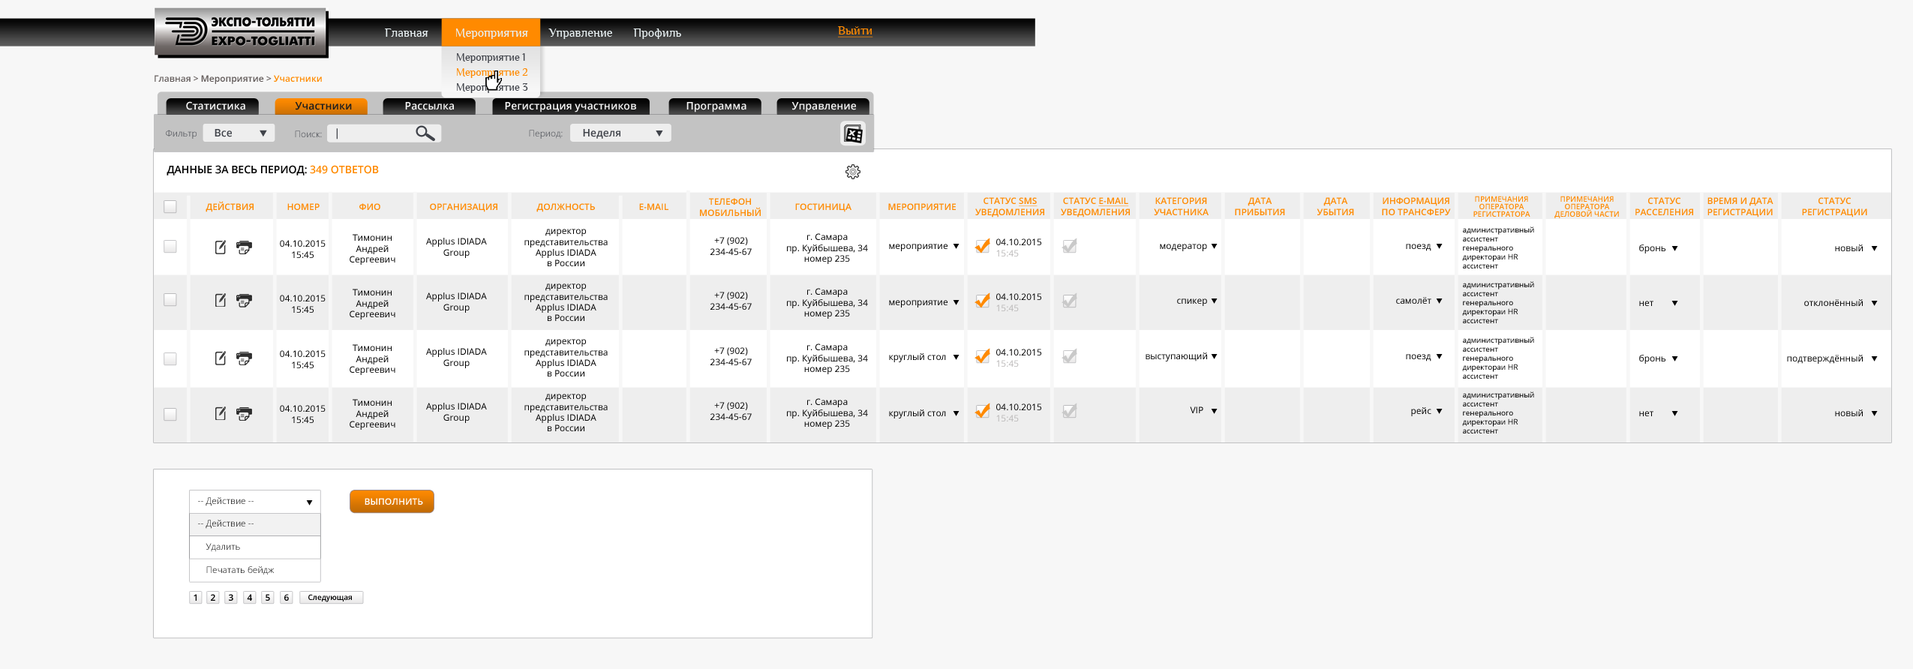
<style>
.page{position:relative;width:1913px;height:669px;background:#f7f7f7}
.page>*{position:absolute;margin:0}
.t1{font:12.4px "Philosopher";color:#e7eff1}
.t2{font:12px "Philosopher";color:#ff8a00;text-decoration:underline}
.t3{font:10.8px/15px "Philosopher";color:#40434a}
.t4{font:10.8px/15px "Philosopher";color:#ff8a00}
.t5{font:9px "OpenSans-Semibold";color:#615a59}
.t6{font:9px "OpenSans-Semibold";color:#ff8a00}
.t7{font:10.5px "OpenSans-Semibold";color:#f7f7f7}
.t8{font:10.5px "OpenSans-Semibold";color:#1d1d1d}
.t9{font:9px "OpenSans-Light"}
.t10{font:10.5px "OpenSans-Semibold";color:#40434a}
.t11{font:9px "OpenSans-Light";color:#40434a}
.t12{font:10.5px "OpenSans-Semibold";color:#000000;text-transform:uppercase}
.t13{font:10.5px "OpenSans-Semibold";color:#ff8a00;text-transform:uppercase}
.t14{font:9px "OpenSans-Semibold";color:#ff8a00;text-transform:uppercase}
.t15{font:9px "OpenSans-Semibold";color:#ff8a00;text-transform:uppercase;text-decoration:underline}
.t16{font:7.5px/7.5px "OpenSans-Semibold";color:#ff8a00;text-transform:uppercase}
.t17{font:9px "OpenSans";color:#000000}
.t18{font:7.5px "OpenSans";color:#000000}
.t19{font:9px "OpenSans";color:#b9b7b7}
.t20{font:9px "OpenSans-Semibold";color:#ffffff;text-transform:uppercase}
.t21{font:9px "OpenSans-Semibold";color:#000000}
.t22{font:7.5px "OpenSans-Semibold";color:#000000}
</style>
<div class="page">
<p class="t1" style="left:385px;top:29px;width:296px;height:10px">Главная         Мероприятия       Управление       Профиль</p>
<p class="t2" style="left:838px;top:26px;width:35px;height:12px">Выйти</p>
<p class="t3" style="left:457px;top:53px;width:71px;height:40px">Мероприятие 1<br><span class="t4">Мероприятие 2<br></span>Мероприятие 3</p>
<p class="t5" style="left:155px;top:75px;width:167px;height:9px">Главная &gt; Мероприятие &gt; <span class="t6">Участники</span></p>
<p class="t7" style="left:186px;top:101px;width:59px;height:9px">Статистика</p>
<p class="t8" style="left:295px;top:102px;width:57px;height:8px">Участники</p>
<p class="t7" style="left:405px;top:102px;width:49px;height:8px">Рассылка</p>
<p class="t7" style="left:505px;top:102px;width:131px;height:11px">Регистрация участников</p>
<p class="t7" style="left:686px;top:102px;width:60px;height:11px">Программа</p>
<p class="t7" style="left:791px;top:102px;width:65px;height:11px">Управление</p>
<p class="t9" style="left:166px;top:130px;width:31px;height:9px">Фильтр</p>
<p class="t10" style="left:215px;top:129px;width:17px;height:8px">Все</p>
<p class="t11" style="left:295px;top:131px;width:27px;height:6px">Поиск:</p>
<p class="t10" style="left:336px;top:128px;width:2px;height:12px">|</p>
<p class="t9" style="left:529px;top:130px;width:34px;height:9px">Период:</p>
<p class="t10" style="left:583px;top:129px;width:37px;height:10px">Неделя</p>
<p class="t12" style="left:167px;top:165px;width:212px;height:11px">данные за весь период: <span class="t13">349 ответов</span></p>
<p class="t14" style="left:975px;top:197px;width:69px;height:21px;text-align:center">Статус <span class="t15">SMS<br></span>уведомления</p>
<p class="t14" style="left:1061px;top:197px;width:69px;height:21px;text-align:center">Статус <span class="t15">e-mail<br></span>уведомления</p>
<p class="t14" style="left:1154px;top:197px;width:54px;height:18px;text-align:center">категория<br>участника</p>
<p class="t14" style="left:1235px;top:197px;width:50px;height:18px;text-align:center">дата<br>прибытия</p>
<p class="t14" style="left:1316px;top:197px;width:38px;height:18px;text-align:center">дата<br>убытия</p>
<p class="t14" style="left:1382px;top:197px;width:69px;height:18px;text-align:center">информация<br>по трансферу</p>
<p class="t16" style="left:1473px;top:196px;width:57px;height:21px;text-align:center">примечания<br>оператора<br>регистратора</p>
<p class="t16" style="left:1554px;top:196px;width:65px;height:22px;text-align:center">примечания<br>оператора<br>деловой части</p>
<p class="t14" style="left:1635px;top:197px;width:58px;height:18px;text-align:center">статус<br>расселения</p>
<p class="t14" style="left:1707px;top:197px;width:66px;height:21px;text-align:center">время и дата<br>регистрации</p>
<p class="t14" style="left:1802px;top:197px;width:65px;height:21px;text-align:center">статус<br>регистрации</p>
<p class="t14" style="left:206px;top:201px;width:48px;height:11px">действия</p>
<p class="t14" style="left:287px;top:203px;width:33px;height:7px">номер</p>
<p class="t14" style="left:359px;top:203px;width:21px;height:7px">фио</p>
<p class="t14" style="left:430px;top:203px;width:67px;height:9px">Организация</p>
<p class="t14" style="left:536px;top:203px;width:59px;height:9px">должность</p>
<p class="t14" style="left:639px;top:203px;width:29px;height:7px">E-mail</p>
<p class="t14" style="left:700px;top:198px;width:61px;height:18px;text-align:center">телефон<br>мобильный</p>
<p class="t14" style="left:795px;top:203px;width:56px;height:9px">гостиница</p>
<p class="t14" style="left:888px;top:203px;width:68px;height:7px">мероприятие</p>
<p class="t17" style="left:524px;top:229px;width:84px;height:37px;text-align:center">директор<br>представительства<br>Applus IDIADA<br>в России</p>
<p class="t17" style="left:787px;top:233px;width:81px;height:31px;text-align:center">г. Самара<br>пр. Куйбышева, 34<br>номер 235</p>
<p class="t18" style="left:1462px;top:227px;width:72px;height:42px">административный<br>ассистент<br>генерального<br>директораи HR<br>ассистент</p>
<p class="t17" style="left:280px;top:240px;width:46px;height:18px;text-align:center">04.10.2015<br>15:45</p>
<p class="t17" style="left:350px;top:234px;width:45px;height:31px;text-align:center">Тимонин<br>Андрей<br>Сергеевич</p>
<p class="t17" style="left:426px;top:238px;width:61px;height:20px;text-align:center">Applus IDIADA<br>Group</p>
<p class="t17" style="left:710px;top:237px;width:42px;height:18px;text-align:center">+7 (902)<br>234-45-67</p>
<p class="t17" style="left:889px;top:244px;width:58px;height:7px">мероприятие</p>
<p class="t17" style="left:996px;top:239px;width:45px;height:18px">04.10.2015<br><span class="t19">15:45</span></p>
<p class="t17" style="left:1160px;top:244px;width:47px;height:7px">модератор</p>
<p class="t17" style="left:1406px;top:244px;width:25px;height:7px">поезд</p>
<p class="t17" style="left:1639px;top:245px;width:26px;height:9px">бронь</p>
<p class="t17" style="left:1835px;top:245px;width:27px;height:6px">новый</p>
<p class="t18" style="left:1462px;top:281px;width:72px;height:42px">административный<br>ассистент<br>генерального<br>директораи HR<br>ассистент</p>
<p class="t17" style="left:350px;top:289px;width:45px;height:31px;text-align:center">Тимонин<br>Андрей<br>Сергеевич</p>
<p class="t17" style="left:426px;top:293px;width:61px;height:20px;text-align:center">Applus IDIADA<br>Group</p>
<p class="t17" style="left:524px;top:284px;width:84px;height:37px;text-align:center">директор<br>представительства<br>Applus IDIADA<br>в России</p>
<p class="t17" style="left:710px;top:292px;width:42px;height:18px;text-align:center">+7 (902)<br>234-45-67</p>
<p class="t17" style="left:787px;top:288px;width:81px;height:31px;text-align:center">г. Самара<br>пр. Куйбышева, 34<br>номер 235</p>
<p class="t17" style="left:996px;top:293px;width:45px;height:18px">04.10.2015<br><span class="t19">15:45</span></p>
<p class="t17" style="left:280px;top:295px;width:46px;height:18px;text-align:center">04.10.2015<br>15:45</p>
<p class="t17" style="left:889px;top:300px;width:58px;height:8px">мероприятие</p>
<p class="t17" style="left:1177px;top:299px;width:30px;height:7px">спикер</p>
<p class="t17" style="left:1396px;top:297px;width:35px;height:7px">самолёт</p>
<p class="t17" style="left:1639px;top:301px;width:14px;height:5px">нет</p>
<p class="t17" style="left:1804px;top:299px;width:58px;height:7px">отклонённый</p>
<p class="t17" style="left:524px;top:339px;width:84px;height:38px;text-align:center">директор<br>представительства<br>Applus IDIADA<br>в России</p>
<p class="t18" style="left:1462px;top:337px;width:72px;height:42px">административный<br>ассистент<br>генерального<br>директораи HR<br>ассистент</p>
<p class="t17" style="left:280px;top:350px;width:46px;height:18px;text-align:center">04.10.2015<br>15:45</p>
<p class="t17" style="left:350px;top:344px;width:45px;height:31px;text-align:center">Тимонин<br>Андрей<br>Сергеевич</p>
<p class="t17" style="left:426px;top:348px;width:61px;height:20px;text-align:center">Applus IDIADA<br>Group</p>
<p class="t17" style="left:710px;top:347px;width:42px;height:18px;text-align:center">+7 (902)<br>234-45-67</p>
<p class="t17" style="left:787px;top:344px;width:81px;height:30px;text-align:center">г. Самара<br>пр. Куйбышева, 34<br>номер 235</p>
<p class="t17" style="left:889px;top:353px;width:57px;height:9px">круглый стол</p>
<p class="t17" style="left:996px;top:349px;width:45px;height:18px">04.10.2015<br><span class="t19">15:45</span></p>
<p class="t17" style="left:1145px;top:353px;width:62px;height:9px">выступающий</p>
<p class="t17" style="left:1406px;top:354px;width:25px;height:8px">поезд</p>
<p class="t17" style="left:1639px;top:355px;width:26px;height:9px">бронь</p>
<p class="t17" style="left:1787px;top:355px;width:75px;height:9px">подтверждённый</p>
<p class="t17" style="left:350px;top:399px;width:45px;height:31px;text-align:center">Тимонин<br>Андрей<br>Сергеевич</p>
<p class="t17" style="left:524px;top:394px;width:84px;height:37px;text-align:center">директор<br>представительства<br>Applus IDIADA<br>в России</p>
<p class="t17" style="left:787px;top:398px;width:81px;height:31px;text-align:center">г. Самара<br>пр. Куйбышева, 34<br>номер 235</p>
<p class="t18" style="left:1462px;top:392px;width:72px;height:42px">административный<br>ассистент<br>генерального<br>директораи HR<br>ассистент</p>
<p class="t17" style="left:280px;top:405px;width:46px;height:18px;text-align:center">04.10.2015<br>15:45</p>
<p class="t17" style="left:426px;top:403px;width:61px;height:20px;text-align:center">Applus IDIADA<br>Group</p>
<p class="t17" style="left:710px;top:402px;width:42px;height:18px;text-align:center">+7 (902)<br>234-45-67</p>
<p class="t17" style="left:889px;top:410px;width:57px;height:9px">круглый стол</p>
<p class="t17" style="left:996px;top:404px;width:45px;height:18px">04.10.2015<br><span class="t19">15:45</span></p>
<p class="t17" style="left:1190px;top:407px;width:13px;height:6px">VIP</p>
<p class="t17" style="left:1411px;top:407px;width:20px;height:9px">рейс</p>
<p class="t17" style="left:1639px;top:411px;width:14px;height:5px">нет</p>
<p class="t17" style="left:1835px;top:410px;width:27px;height:6px">новый</p>
<p class="t9" style="left:198px;top:497px;width:56px;height:9px">-- Действие --</p>
<p class="t20" style="left:365px;top:498px;width:58px;height:7px">выполнИТЬ</p>
<p class="t9" style="left:198px;top:520px;width:56px;height:9px">-- Действие --</p>
<p class="t9" style="left:206px;top:543px;width:34px;height:9px">Удалить</p>
<p class="t9" style="left:206px;top:566px;width:68px;height:9px">Печатать бейдж</p>
<p class="t21" style="left:194px;top:594px;width:3px;height:7px">1</p>
<p class="t21" style="left:211px;top:594px;width:4px;height:7px">2</p>
<p class="t21" style="left:229px;top:594px;width:4px;height:7px">3</p>
<p class="t21" style="left:247px;top:594px;width:5px;height:7px">4</p>
<p class="t21" style="left:266px;top:594px;width:4px;height:7px">5</p>
<p class="t21" style="left:284px;top:594px;width:5px;height:7px">6</p>
<p class="t22" style="left:308px;top:594px;width:44px;height:8px">Следующая</p>
</div>
